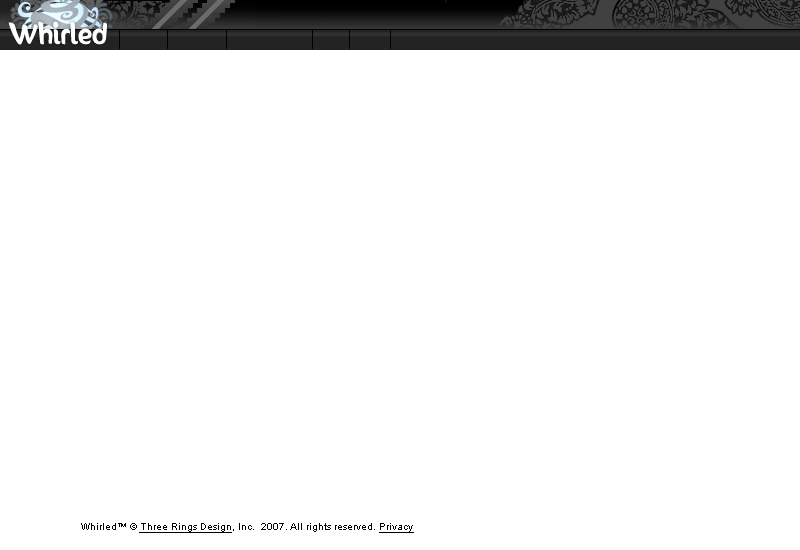
<style>
.page{position:relative;width:800px;height:550px;background:#ffffff}
.page>*{position:absolute;margin:0}
.t1{font:24px "SunnySide";color:#ffffff}
.t2{font:10px "ArialMT";color:#000000}
.t3{font:10px "ArialMT";color:#000000;text-decoration:underline}
</style>
<div class="page">
<p class="t1" style="left:8px;top:21px;width:99px;height:24px">Whirled</p>
<p class="t2" style="left:81px;top:523px;width:333px;height:10px">Whirled™ © <span class="t3">Three Rings Design</span>, Inc.  2007. All rights reserved. <span class="t3">Privacy</span></p>
</div>
